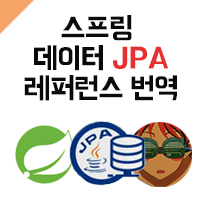
<style>
.page{position:relative;width:200px;height:200px;background:#ffffff}
.page>*{position:absolute;margin:0}
.t1{font:30px/30px "BMHANNA";color:#0b0a0a}
.t2{font:30px/30px "BMHANNA";color:#e73131}
</style>
<div class="page">
<p class="t1" style="left:24px;top:15px;width:153px;height:86px;text-align:center">스프링 <br>데이터 <span class="t2">JPA<br></span>레퍼런스 번역</p>
</div>
